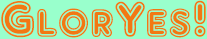
<style>
.page{position:relative;width:207px;height:39px;background:#99ffcc}
.page>*{position:absolute;margin:0}
.t1{font:52px "ARDELANEY";color:#f27813}
</style>
<div class="page">
<p class="t1" style="left:1px;top:0px;width:205px;height:38px">GlorYes!</p>
</div>
